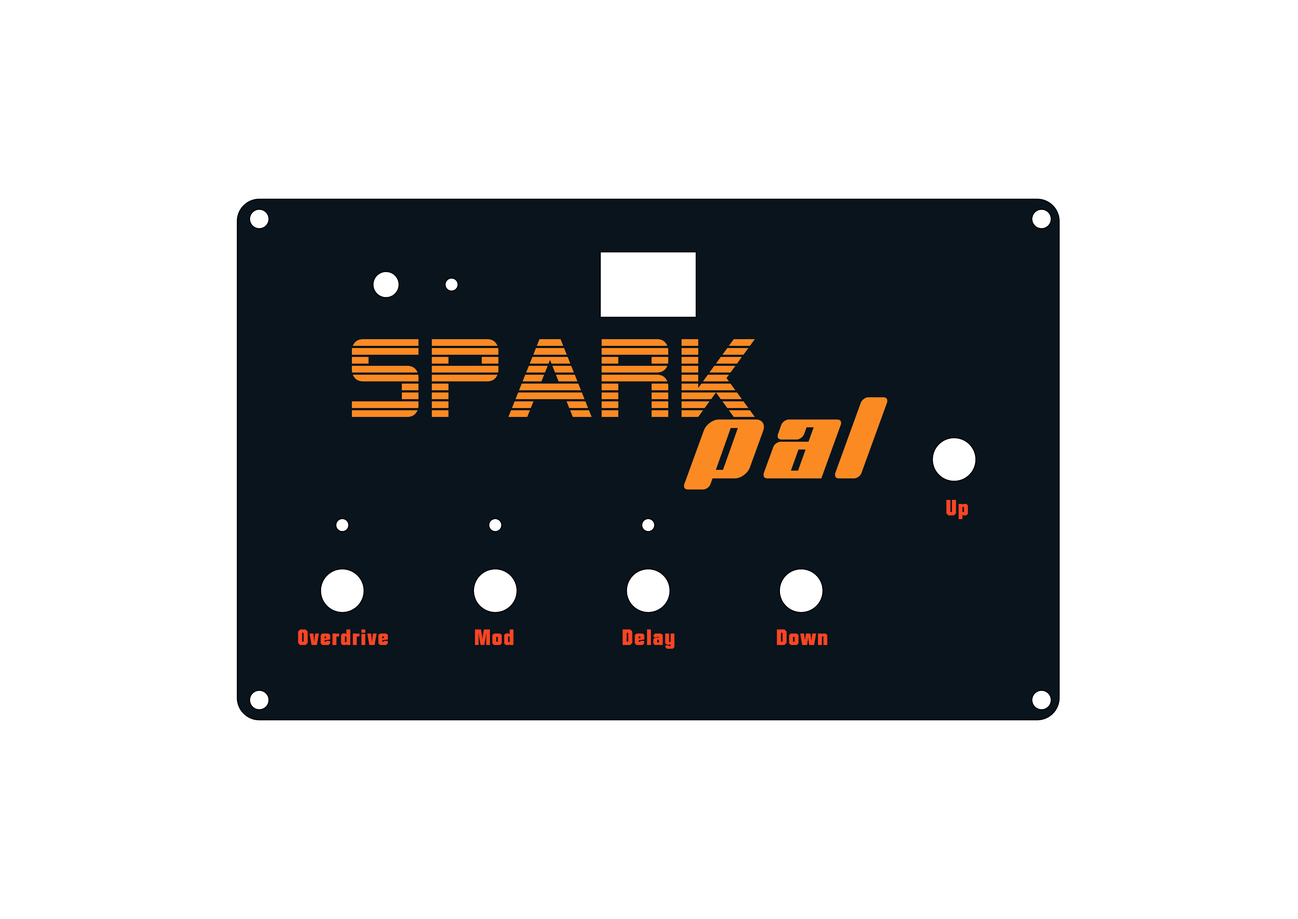
<style>
.page{position:relative;width:1298px;height:919px;background:#ffffff}
.page>*{position:absolute;margin:0}
.t1{font:111px "AlienEncounters";letter-spacing:0.06em;color:#fc8a23}
.t2{font:111px "BNJinx";letter-spacing:0.06em;color:#fc8a23}
.t3{font:21.6px "Autumn";letter-spacing:0.06em;color:#ff4422}
</style>
<div class="page">
<p class="t1" style="left:352px;top:339px;width:403px;height:78px">Spark</p>
<p class="t2" style="left:684px;top:397px;width:203px;height:92px">Pal</p>
<p class="t3" style="left:946px;top:500px;width:22px;height:19px">Up</p>
<p class="t3" style="left:298px;top:629px;width:90px;height:16px">Overdrive</p>
<p class="t3" style="left:475px;top:629px;width:39px;height:16px">Mod</p>
<p class="t3" style="left:622px;top:629px;width:53px;height:19px">Delay</p>
<p class="t3" style="left:777px;top:629px;width:50px;height:16px">Down</p>
</div>
